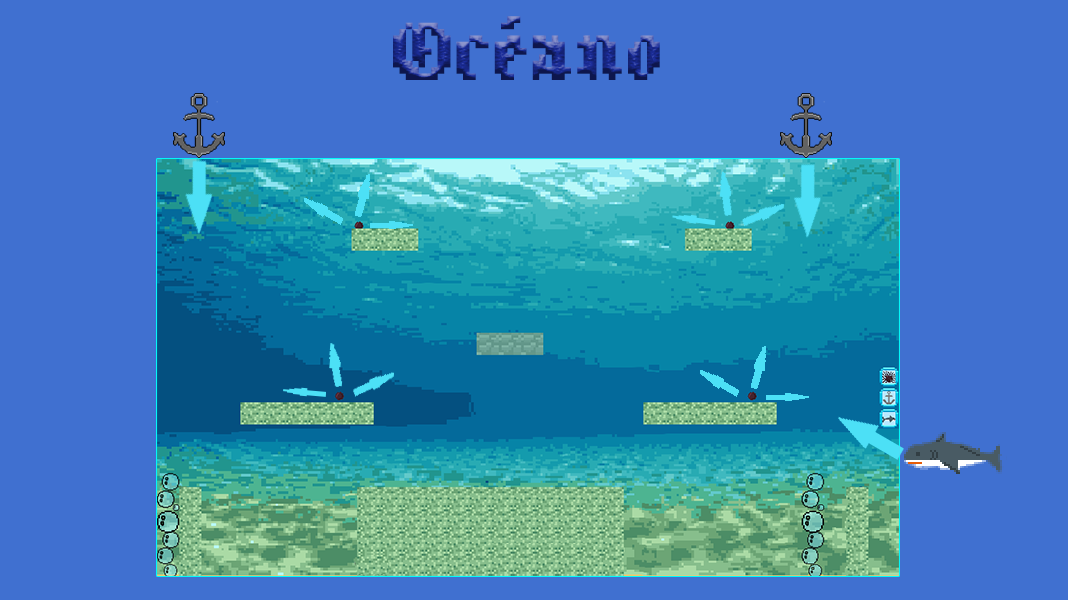
<style>
.page{position:relative;width:1068px;height:600px;background:#4070d0}
.page>*{position:absolute;margin:0}
.t1{font:101.5px "OwreKynge"}
</style>
<div class="page">
<p class="t1" style="left:393px;top:16px;width:267px;height:64px">Océano</p>
</div>
